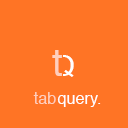
<style>
.page{position:relative;width:128px;height:128px;background:#ff7425}
.page>*{position:absolute;margin:0}
.t1{font:38px "Helvetica";color:#ffcfbd}
.t2{font:28.9px "Helvetica"}
.t3{font:16.6px "Helvetica"}
.t4{font:21.8px "Helvetica"}
.t5{font:16.5px "Helvetica";color:#ffcfbd}
</style>
<div class="page">
<p class="t1" style="left:52px;top:50px;width:10px;height:26px">t</p>
<p class="t2" style="left:53px;top:55px;width:21px;height:22px">Q</p>
<p class="t3" style="left:27px;top:88px;width:74px;height:19px"><span class="t4">tab</span>query.</p>
<p class="t5" style="left:33px;top:92px;width:23px;height:12px">tab</p>
</div>
